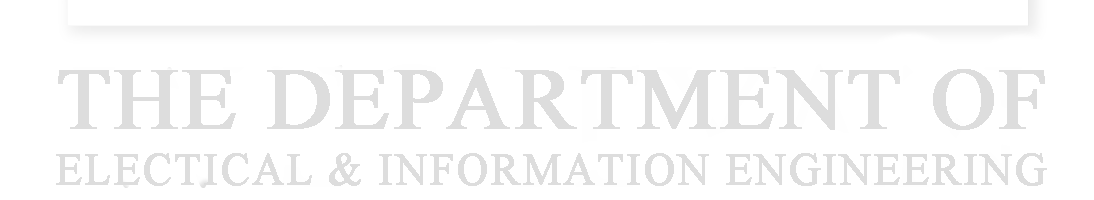
<style>
.page{position:relative;width:1094px;height:200px;background:#ffffff}
.page>*{position:absolute;margin:0}
.t1{font:88px "TimesNewRomanPSMT";letter-spacing:0.025em;color:#dddddd;font-weight:bold}
.t2{font:44px "TimesNewRomanPSMT";letter-spacing:0.025em;color:#dddddd;font-weight:bold}
</style>
<div class="page">
<p class="t1" style="left:58px;top:69px;width:987px;height:61px">THE DEPARTMENT OF</p>
<p class="t2" style="left:56px;top:153px;width:991px;height:33px">ELECTICAL &amp; INFORMATION ENGINEERING</p>
</div>
